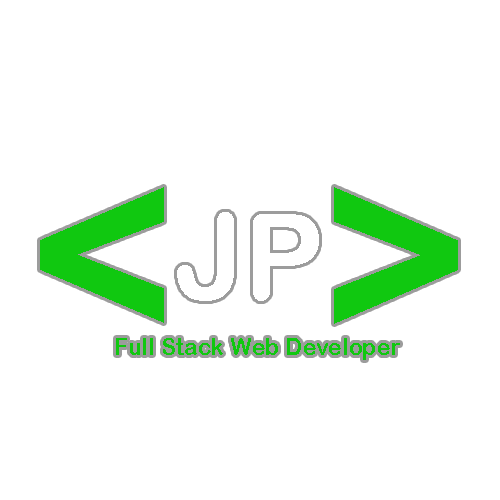
<style>
.page{position:relative;width:500px;height:500px;background:#ffffff}
.page>*{position:absolute;margin:0}
.t1{font:251px "ArialRoundedMTBold";color:#10c810}
.t2{font:24.2px "ArialRoundedMTBold";color:#10c810;scale:0.96 1}
</style>
<div class="page">
<p class="t1" style="left:40px;top:187px;width:418px;height:137px">&lt;   &gt;</p>
<p class="t2" style="left:116px;top:338px;width:284px;height:22px">Full Stack Web Developer</p>
</div>
